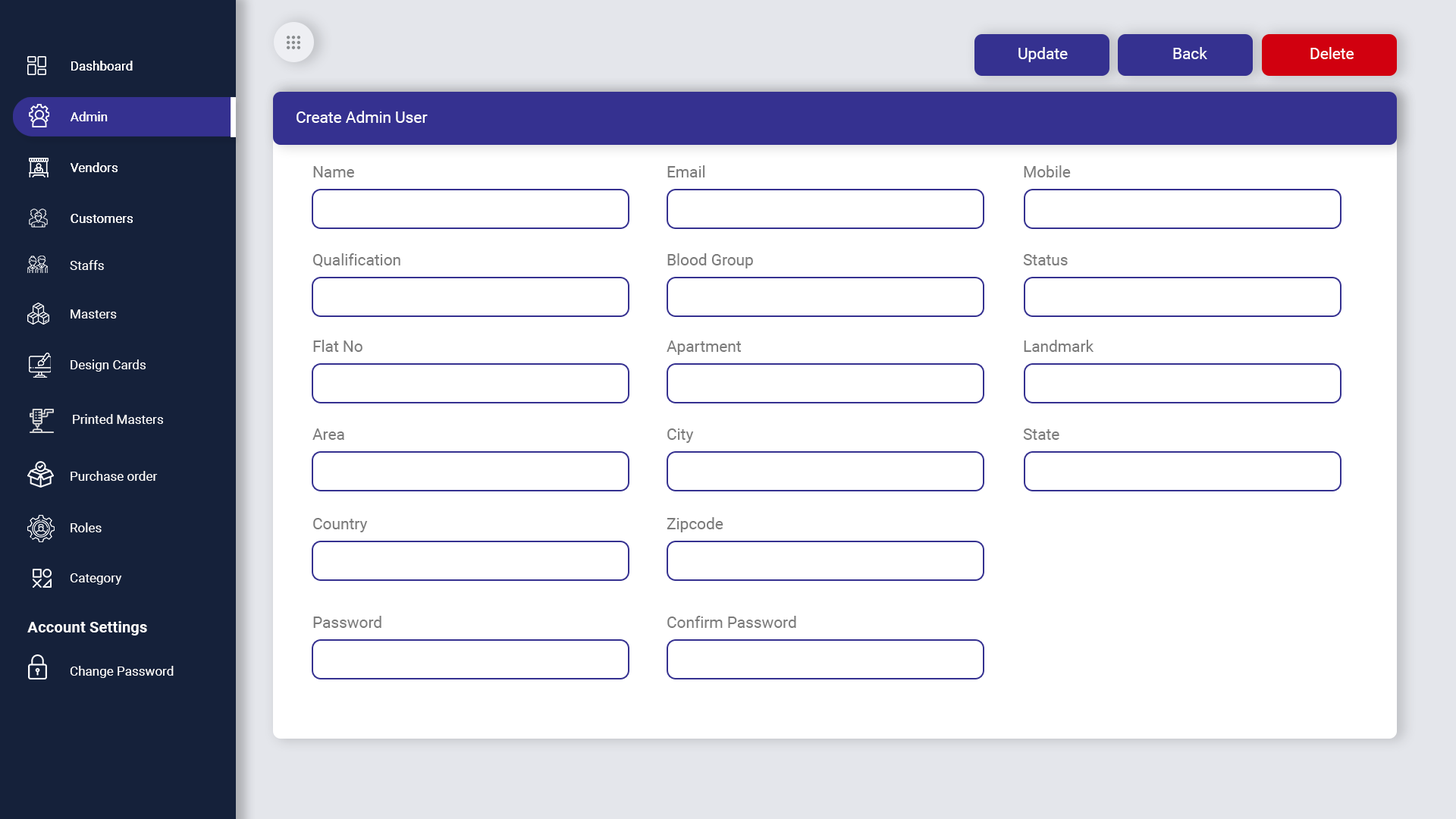
<style>
.page{position:relative;width:1456px;height:819px;background:#ffffff}
.page>*{position:absolute;margin:0}
.t1{font:15.8px "Roboto-Regular";color:#ffffff}
.t2{font:12.9px "Roboto-Regular";color:#ffffff}
.t3{font:15.8px "Roboto-Regular";color:#7b7b7b}
.t4{font:15.5px "Roboto-Bold";color:#ffffff}
</style>
<div class="page">
<p class="t1" style="left:1018px;top:47px;width:50px;height:15px">Update</p>
<p class="t1" style="left:1173px;top:47px;width:34px;height:12px">Back</p>
<p class="t1" style="left:1310px;top:47px;width:44px;height:12px">Delete</p>
<p class="t2" style="left:71px;top:61px;width:62px;height:10px">Dashboard</p>
<p class="t2" style="left:71px;top:61px;width:62px;height:10px">Dashboard</p>
<p class="t2" style="left:71px;top:111px;width:37px;height:10px">Admin</p>
<p class="t2" style="left:71px;top:111px;width:37px;height:10px">Admin</p>
<p class="t1" style="left:297px;top:111px;width:131px;height:12px">Create Admin User</p>
<p class="t2" style="left:71px;top:162px;width:47px;height:10px">Vendors</p>
<p class="t2" style="left:71px;top:162px;width:47px;height:10px">Vendors</p>
<p class="t3" style="left:313px;top:166px;width:41px;height:11px">Name</p>
<p class="t3" style="left:667px;top:165px;width:38px;height:12px">Email</p>
<p class="t3" style="left:1024px;top:165px;width:47px;height:12px">Mobile</p>
<p class="t2" style="left:71px;top:214px;width:62px;height:9px">Customers</p>
<p class="t2" style="left:71px;top:214px;width:62px;height:9px">Customers</p>
<p class="t3" style="left:313px;top:253px;width:87px;height:15px">Qualification</p>
<p class="t3" style="left:667px;top:253px;width:86px;height:15px">Blood Group</p>
<p class="t3" style="left:1023px;top:254px;width:45px;height:11px">Status</p>
<p class="t2" style="left:70px;top:260px;width:34px;height:10px">Staffs</p>
<p class="t2" style="left:71px;top:309px;width:46px;height:9px">Masters</p>
<p class="t3" style="left:313px;top:340px;width:49px;height:12px">Flat No</p>
<p class="t3" style="left:667px;top:340px;width:74px;height:15px">Apartment</p>
<p class="t3" style="left:1024px;top:340px;width:70px;height:12px">Landmark</p>
<p class="t2" style="left:71px;top:359px;width:75px;height:13px">Design Cards</p>
<p class="t2" style="left:73px;top:414px;width:90px;height:10px">Printed Masters</p>
<p class="t3" style="left:312px;top:428px;width:32px;height:12px">Area</p>
<p class="t3" style="left:667px;top:428px;width:27px;height:15px">City</p>
<p class="t3" style="left:1023px;top:428px;width:36px;height:12px">State</p>
<p class="t2" style="left:71px;top:471px;width:87px;height:10px">Purchase order</p>
<p class="t3" style="left:313px;top:518px;width:55px;height:14px">Country</p>
<p class="t3" style="left:667px;top:517px;width:56px;height:15px">Zipcode</p>
<p class="t2" style="left:71px;top:522px;width:31px;height:10px">Roles</p>
<p class="t2" style="left:70px;top:573px;width:52px;height:12px">Category</p>
<p class="t3" style="left:313px;top:616px;width:68px;height:12px">Password</p>
<p class="t3" style="left:667px;top:616px;width:129px;height:12px">Confirm Password</p>
<p class="t4" style="left:27px;top:621px;width:120px;height:14px">Account Settings</p>
<p class="t2" style="left:70px;top:666px;width:104px;height:12px">Change Password</p>
</div>
